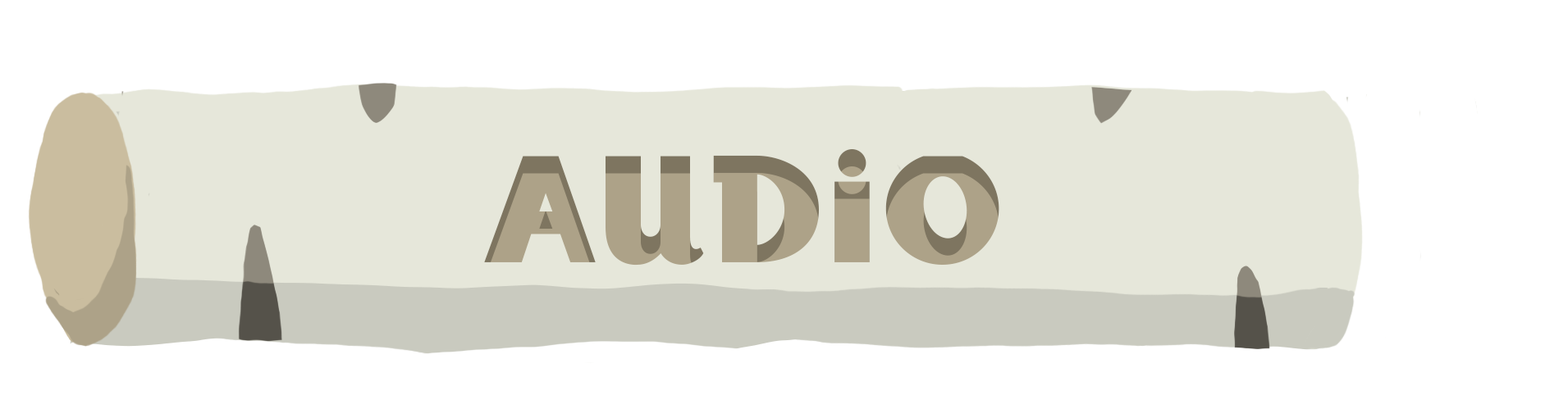
<style>
.page{position:relative;width:1568px;height:409px;background:#ffffff}
.page>*{position:absolute;margin:0}
.t1{font:148px "BadTyp-Regular";color:#ada288}
</style>
<div class="page">
<p class="t1" style="left:484px;top:149px;width:515px;height:117px">Audio</p>
</div>
